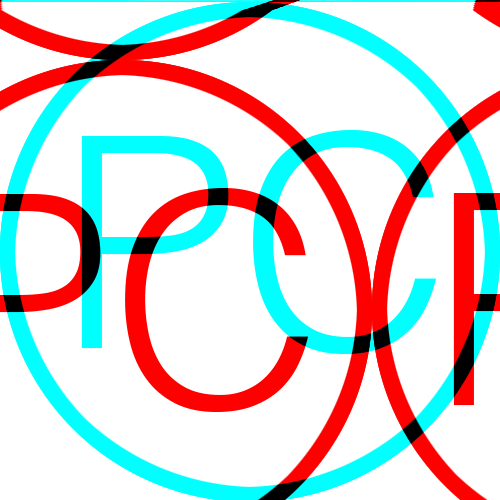
<style>
.page{position:relative;width:500px;height:500px;background:#ffffff}
.page>*{position:absolute;margin:0}
.t1{font:294.9px "Helvetica-Light";color:#00ffff}
</style>
<div class="page">
<p class="t1" style="left:81px;top:128px;width:355px;height:224px">PC</p>
</div>
